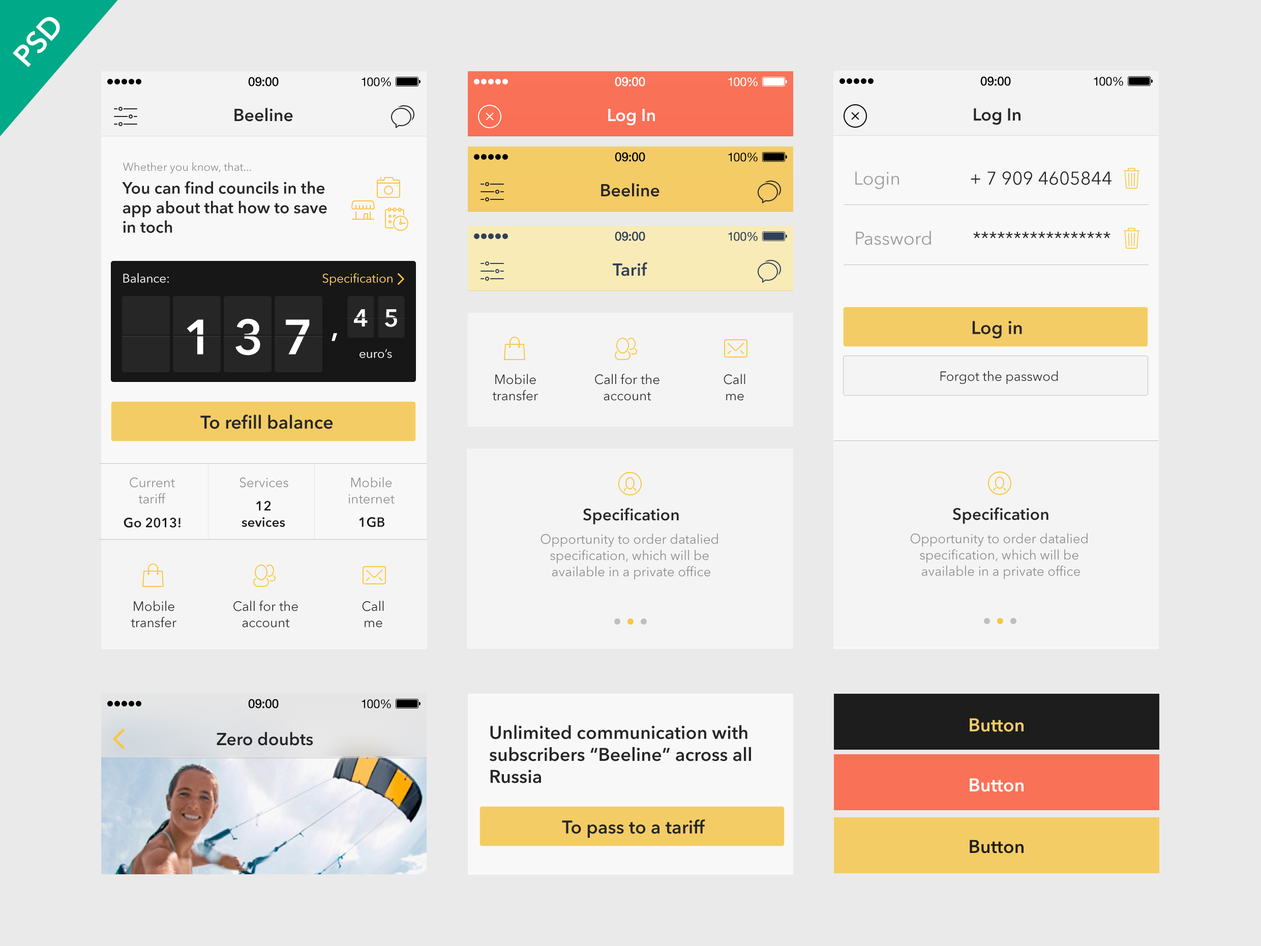
<style>
.page{position:relative;width:1261px;height:946px;background:#eaeaea}
.page>*{position:absolute;margin:0}
.t1{font:29.5px "AvenirNextLTPro-Demi";color:#ffffff}
.t2{font:12.7px "HelveticaNeue-Medium";letter-spacing:-0.02em;color:#000000}
.t3{font:12.2px "HelveticaNeue";letter-spacing:-0.02em;color:#010101}
.t4{font:12.7px "HelveticaNeue-Medium";letter-spacing:-0.02em;color:#ffffff}
.t5{font:12.2px "HelveticaNeue";letter-spacing:-0.02em;color:#ffffff}
.t6{font:17.3px "AvenirNextLTPro-Demi";color:#262626}
.t7{font:17.3px "AvenirNextLTPro-Demi";color:#ffffff}
.t8{font:11.2px "AvenirNextLTPro-Regular";color:#8d8d8d}
.t9{font:18.3px "AvenirNextLTPro-Regular";color:#9c9b9b}
.t10{font:18.3px "AvenirNextLTPro-Regular";color:#262626}
.t11{font:16.3px "AvenirNextLTPro-Demi";color:#262626}
.t12{font:12.7px "HelveticaNeue-Medium";letter-spacing:-0.02em;color:#304059}
.t13{font:12.2px "HelveticaNeue";letter-spacing:-0.02em;color:#304059}
.t14{font:17.3px "AvenirNextLTPro-Demi";color:#304059}
.t15{font:12.2px "AvenirNextLTPro-Regular";color:#ffffff}
.t16{font:12.2px "AvenirNextLTPro-Regular";color:#ffd462}
.t17{font:24.4px "AvenirNextLTPro-Demi";color:#ffffff}
.t18{font:48.8px "AvenirNextLTPro-Demi";color:#ffffff}
.t19{font:18.3px "AvenirNextLTPro-Demi";color:#262626}
.t20{font:13.2px/16.3px "AvenirNextLTPro-Regular";color:#262626}
.t21{font:13.2px/16.3px "AvenirNextLTPro-Regular";color:#8d8d8d}
.t22{font:13.2px "AvenirNextLTPro-Regular";color:#262626}
.t23{font:13.2px "AvenirNextLTPro-Regular";color:#8d8d8d}
.t24{font:13.2px/16.3px "AvenirNextLTPro-Demi";color:#171717}
.t25{font:16.3px "AvenirNextLTPro-Demi";color:#282828}
.t26{font:13.2px "AvenirNextLTPro-Demi";color:#171717}
.t27{font:18.3px "AvenirNextLTPro-Demi";color:#f4cc66}
.t28{font:18.3px "AvenirNextLTPro-Demi";color:#ffffff}
.t29{font:18.3px "AvenirNextLTPro-Demi";color:#1d1d1d}
</style>
<div class="page">
<p class="t1" style="left:13px;top:17px;width:47px;height:50px;rotate:-48deg">PSD</p>
<p class="t2" style="left:248px;top:77px;width:31px;height:9px">09:00</p>
<p class="t3" style="left:361px;top:77px;width:30px;height:9px">100%</p>
<p class="t4" style="left:615px;top:77px;width:30px;height:9px">09:00</p>
<p class="t5" style="left:728px;top:77px;width:30px;height:9px">100%</p>
<p class="t2" style="left:980px;top:76px;width:31px;height:10px">09:00</p>
<p class="t3" style="left:1094px;top:77px;width:29px;height:9px">100%</p>
<p class="t6" style="left:234px;top:108px;width:59px;height:14px">Beeline</p>
<p class="t7" style="left:608px;top:109px;width:47px;height:17px">Log In</p>
<p class="t6" style="left:974px;top:108px;width:46px;height:17px">Log In</p>
<p class="t2" style="left:615px;top:152px;width:30px;height:10px">09:00</p>
<p class="t3" style="left:728px;top:153px;width:30px;height:9px">100%</p>
<p class="t8" style="left:123px;top:162px;width:128px;height:11px">Whether you know, that...</p>
<p class="t9" style="left:855px;top:171px;width:44px;height:18px">Login</p>
<p class="t10" style="left:971px;top:171px;width:140px;height:14px">+ 7 909 4605844</p>
<p class="t11" style="left:122px;top:181px;width:205px;height:52px">You can find councils in the <br>app about that how to save <br>in toch</p>
<p class="t6" style="left:601px;top:183px;width:58px;height:14px">Beeline</p>
<p class="t12" style="left:615px;top:231px;width:30px;height:10px">09:00</p>
<p class="t13" style="left:728px;top:232px;width:30px;height:9px">100%</p>
<p class="t9" style="left:856px;top:230px;width:75px;height:15px">Password</p>
<p class="t10" style="left:973px;top:231px;width:137px;height:7px">*****************</p>
<p class="t14" style="left:613px;top:262px;width:34px;height:14px">Tarif</p>
<p class="t15" style="left:123px;top:273px;width:46px;height:10px">Balance:</p>
<p class="t16" style="left:322px;top:273px;width:71px;height:13px">Specification</p>
<p class="t17" style="left:354px;top:309px;width:14px;height:17px">4</p>
<p class="t17" style="left:385px;top:309px;width:12px;height:18px">5</p>
<p class="t18" style="left:187px;top:319px;width:16px;height:35px">1</p>
<p class="t18" style="left:235px;top:318px;width:25px;height:37px">3</p>
<p class="t18" style="left:286px;top:319px;width:24px;height:35px">7</p>
<p class="t19" style="left:972px;top:321px;width:50px;height:18px">Log in</p>
<p class="t1" style="left:331px;top:333px;width:6px;height:8px">,</p>
<p class="t15" style="left:359px;top:349px;width:33px;height:9px">euro’s</p>
<p class="t20" style="left:492px;top:374px;width:46px;height:27px;text-align:center"><span class="t21">  </span>Mobile  <br>transfer</p>
<p class="t20" style="left:595px;top:374px;width:64px;height:27px;text-align:center"><span class="t21">  </span>Call for the  <br>account</p>
<p class="t20" style="left:724px;top:374px;width:21px;height:27px;text-align:center"><span class="t21">  </span>Call<br>  me</p>
<p class="t22" style="left:940px;top:371px;width:118px;height:13px">Forgot the passwod</p>
<p class="t19" style="left:200px;top:414px;width:133px;height:15px">To refill balance</p>
<p class="t21" style="left:130px;top:477px;width:45px;height:26px;text-align:center">Current<br>tariff</p>
<p class="t23" style="left:239px;top:477px;width:49px;height:11px">Services</p>
<p class="t21" style="left:348px;top:477px;width:47px;height:26px;text-align:center">Mobile <br>internet</p>
<p class="t24" style="left:242px;top:500px;width:43px;height:27px;text-align:center">12<br>sevices</p>
<p class="t25" style="left:583px;top:507px;width:96px;height:17px">Specification</p>
<p class="t25" style="left:952px;top:507px;width:96px;height:17px">Specification</p>
<p class="t26" style="left:124px;top:517px;width:56px;height:11px">Go 2013!</p>
<p class="t26" style="left:359px;top:517px;width:25px;height:10px">1GB</p>
<p class="t21" style="left:540px;top:533px;width:178px;height:47px;text-align:center">Opportunity to order datalied <br>specification, which will be <br>available in a private office</p>
<p class="t21" style="left:910px;top:533px;width:178px;height:46px;text-align:center">Opportunity to order datalied <br>specification, which will be <br>available in a private office</p>
<p class="t20" style="left:131px;top:600px;width:45px;height:27px;text-align:center"><span class="t21">  </span>Mobile  <br>transfer</p>
<p class="t20" style="left:233px;top:600px;width:65px;height:27px;text-align:center"><span class="t21">  </span>Call for the  <br>account</p>
<p class="t20" style="left:362px;top:600px;width:22px;height:27px;text-align:center"><span class="t21">  </span>Call<br>  me</p>
<p class="t2" style="left:248px;top:699px;width:31px;height:9px">09:00</p>
<p class="t3" style="left:361px;top:699px;width:30px;height:9px">100%</p>
<p class="t19" style="left:489px;top:725px;width:262px;height:58px">Unlimited communication with<br>subscribers “Beeline” across all<br>Russia</p>
<p class="t27" style="left:970px;top:718px;width:53px;height:14px">Button</p>
<p class="t6" style="left:217px;top:732px;width:96px;height:13px">Zero doubts</p>
<p class="t28" style="left:970px;top:778px;width:53px;height:14px">Button</p>
<p class="t19" style="left:562px;top:819px;width:143px;height:19px">To pass to a tariff</p>
<p class="t29" style="left:970px;top:839px;width:53px;height:14px">Button</p>
</div>
